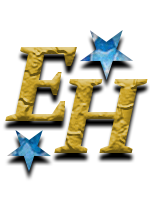
<style>
.page{position:relative;width:150px;height:200px;background:#ffffff}
.page>*{position:absolute;margin:0}
.t1{font:105.6px "PTSerif-BoldItalic"}
</style>
<div class="page">
<p class="t1" style="left:5px;top:47px;width:72px;height:74px">E</p>
<p class="t1" style="left:54px;top:79px;width:94px;height:74px">H</p>
</div>
